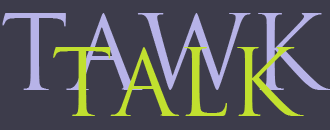
<style>
.page{position:relative;width:330px;height:130px;background:#3d3c4b}
.page>*{position:absolute;margin:0}
.t1{font:100px "Trajan";color:#b7b3e8}
.t2{font:90px "Trajan";color:#c1e02f}
</style>
<div class="page">
<p class="t1" style="left:2px;top:13px;width:330px;height:77px">TAWK</p>
<p class="t2" style="left:53px;top:47px;width:251px;height:69px">TALK</p>
</div>
